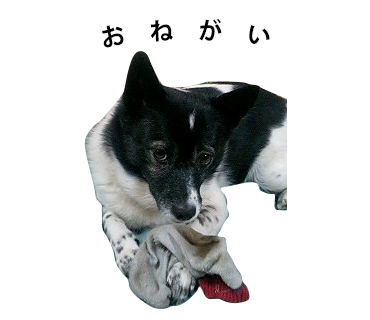
<style>
.page{position:relative;width:370px;height:320px;background:#ffffff}
.page>*{position:absolute;margin:0}
.t1{font:24px "KozGoPr6N-Bold";color:#000000}
</style>
<div class="page">
<p class="t1" style="left:102px;top:18px;width:168px;height:30px">お　ね　が　い</p>
</div>
